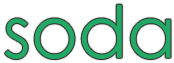
<style>
.page{position:relative;width:174px;height:63px;background:#ffffff}
.page>*{position:absolute;margin:0}
.t1{font:72px "STHeiti";color:#21a965}
</style>
<div class="page">
<p class="t1" style="left:5px;top:4px;width:166px;height:55px">soda</p>
</div>
